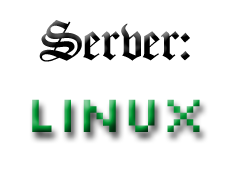
<style>
.page{position:relative;width:230px;height:195px;background:#ffffff}
.page>*{position:absolute;margin:0}
.t1{font:60px "Oldchristmas-Regular";color:#000000}
.t2{font:54px "Silkscreen"}
</style>
<div class="page">
<p class="t1" style="left:39px;top:20px;width:151px;height:42px">Server:</p>
<p class="t2" style="left:32px;top:99px;width:168px;height:33px">linux</p>
</div>
